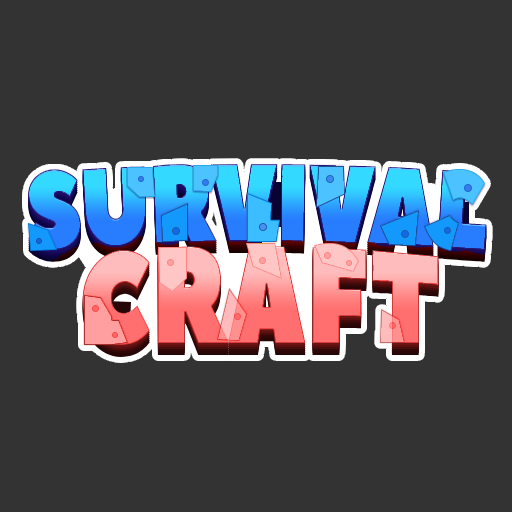
<style>
.page{position:relative;width:512px;height:512px;background:#333333}
.page>*{position:absolute;margin:0}
.t1{font:109.7px "PeaceSans";letter-spacing:-0.025em;scale:0.81 1}
.t2{font:123.7px "PeaceSans";scale:0.83 1}
</style>
<div class="page">
<p class="t1" style="left:28px;top:164px;width:459px;height:86px">SURVIVAL</p>
<p class="t2" style="left:82px;top:246px;width:357px;height:99px">CRAFT</p>
</div>
